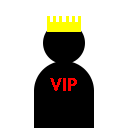
<style>
.page{position:relative;width:128px;height:128px;background:#ffffff}
.page>*{position:absolute;margin:0}
.t1{font:18px "TrebuchetMS-Bold";color:#ff0000}
</style>
<div class="page">
<p class="t1" style="left:50px;top:78px;width:27px;height:13px">VIP</p>
</div>
